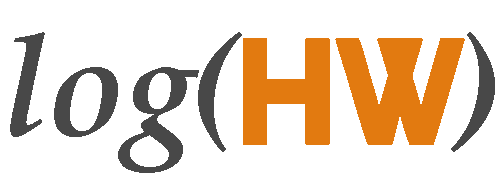
<style>
.page{position:relative;width:500px;height:180px;background:#ffffff}
.page>*{position:absolute;margin:0}
.t1{font:140px "PalatinoLinotype-BoldItalic";color:#484848}
.t2{font:150px "Round-Bold";color:#e27a10}
</style>
<div class="page">
<p class="t1" style="left:10px;top:32px;width:485px;height:141px">log(       )</p>
<p class="t2" style="left:243px;top:38px;width:222px;height:107px">HW</p>
</div>
